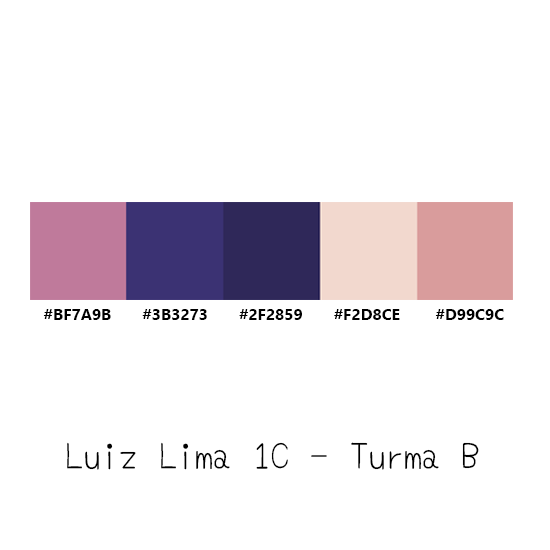
<style>
.page{position:relative;width:550px;height:550px;background:#ffffff}
.page>*{position:absolute;margin:0}
.t1{font:16px "SegoeUI-Bold";color:#000000}
.t2{font:36px "Yomogi-Regular";color:#000000}
</style>
<div class="page">
<p class="t1" style="left:43px;top:309px;width:461px;height:11px">#BF7A9B       #3B3273       #2F2859       #F2D8CE        #D99C9C</p>
<p class="t2" style="left:67px;top:442px;width:412px;height:28px">Luiz Lima 1C - Turma B</p>
</div>
